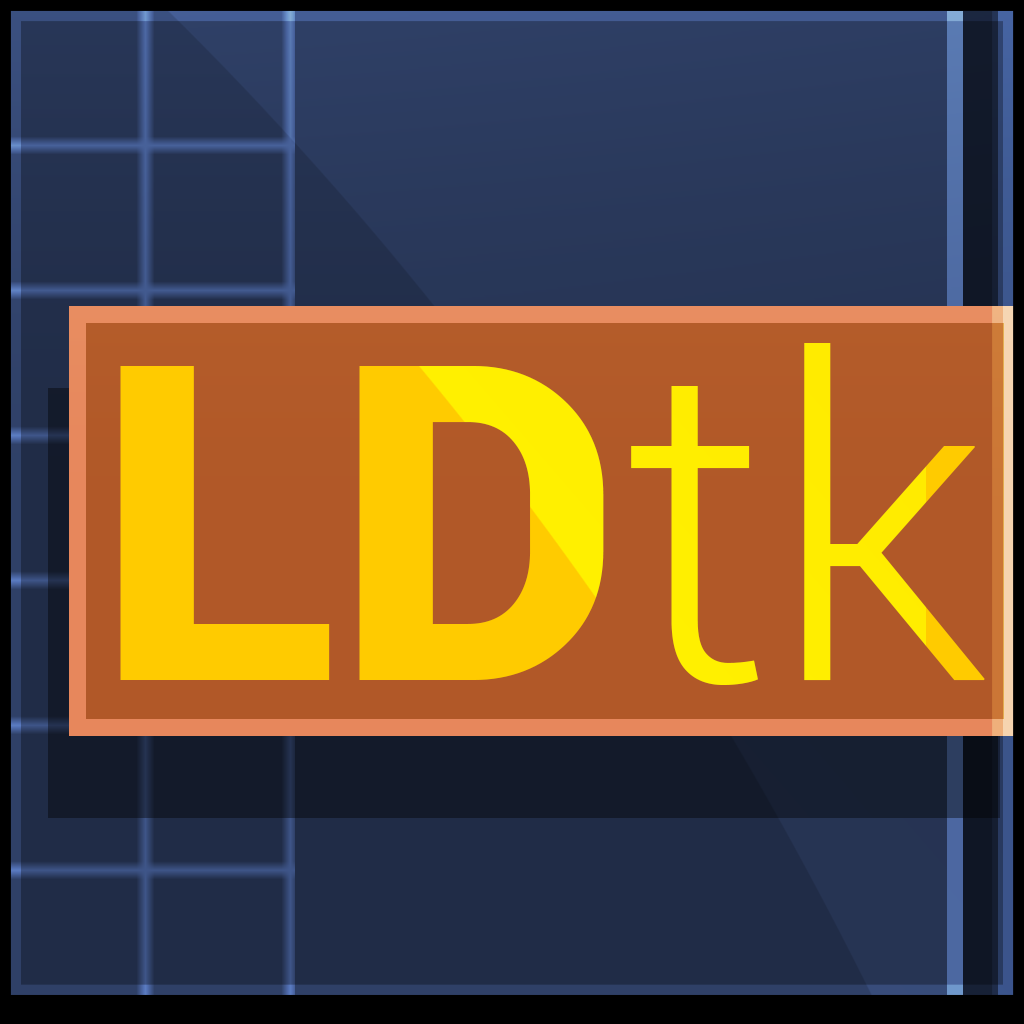
<style>
.page{position:relative;width:1024px;height:1024px}
.page>*{position:absolute;margin:0}
.t1{font:441.8px "Roboto-Black";color:#ffcc00}
.t2{font:441.8px "Roboto-Light";color:#ffcc00}
</style>
<div class="page">
<p class="t1" style="left:120px;top:343px;width:865px;height:342px">LD<span class="t2">tk</span></p>
</div>
